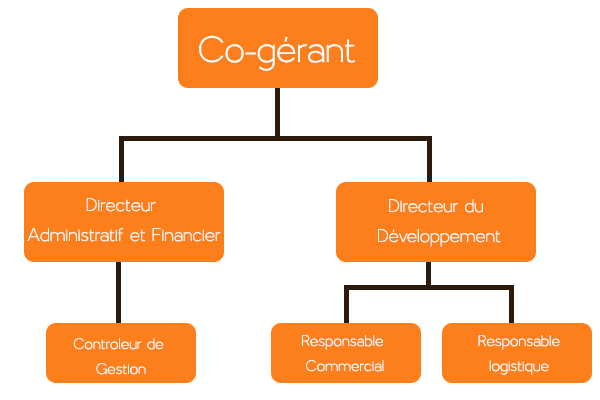
<style>
.page{position:relative;width:600px;height:400px;background:#ffffff}
.page>*{position:absolute;margin:0}
.t1{font:50px "Larke-Regular";color:#fefefe}
.t2{font:25px "Larke-Regular";color:#fefefe}
.t3{font:20.8px "Larke-Regular";color:#fefefe}
</style>
<div class="page">
<p class="t1" style="left:199px;top:35px;width:156px;height:36px">Co-gérant</p>
<p class="t2" style="left:27px;top:198px;width:194px;height:44px;text-align:center">Directeur <br>Administratif et Financier</p>
<p class="t2" style="left:378px;top:199px;width:123px;height:48px;text-align:center">Directeur du <br>Développement</p>
<p class="t3" style="left:73px;top:338px;width:91px;height:37px;text-align:center">Controleur de <br>Gestion</p>
<p class="t3" style="left:302px;top:335px;width:82px;height:37px;text-align:center">Responsable <br>Commercial</p>
<p class="t3" style="left:478px;top:335px;width:82px;height:40px;text-align:center">Responsable<br>logistique</p>
</div>
